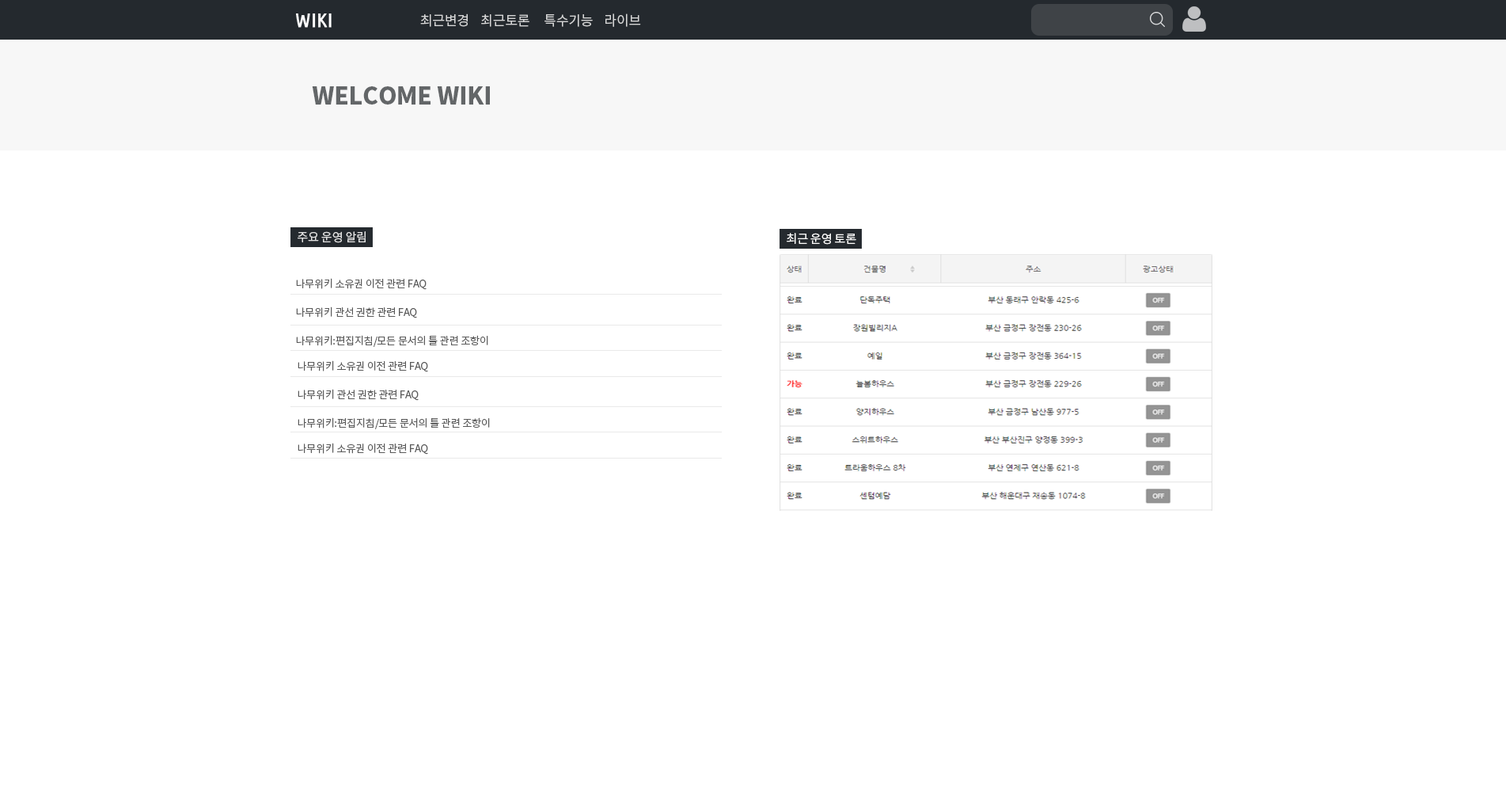
<style>
.page{position:relative;width:1506px;height:792px;background:#ffffff}
.page>*{position:absolute;margin:0}
.t1{font:19.8px "UbuntuCondensed-Regular";color:#ffffff;text-transform:uppercase;font-weight:bold}
.t2{font:13.5px "NotoSansCJKkr-DemiLight";letter-spacing:-0.01em;color:#d7d7d8;text-transform:uppercase}
.t3{font:23.7px "NotoSansCJKkr-Black";letter-spacing:-0.01em;color:#636668;text-transform:uppercase}
.t4{font:11.9px "NotoSansCJKkr-DemiLight";letter-spacing:-0.01em;color:#e3e3e3;text-transform:uppercase}
.t5{font:11.9px "NotoSansCJKkr-DemiLight";letter-spacing:-0.01em;color:#ffffff;text-transform:uppercase}
.t6{font:10.3px/28.5px "NotoSansCJKkr-DemiLight";letter-spacing:-0.01em;color:#5a5a5a;text-transform:uppercase}
.t7{font:10.3px "NotoSansCJKkr-DemiLight";letter-spacing:-0.01em;color:#5a5a5a;text-transform:uppercase}
</style>
<div class="page">
<p class="t1" style="left:296px;top:13px;width:36px;height:15px">wiki</p>
<p class="t2" style="left:420px;top:13px;width:221px;height:14px">최근변경    최근토론     특수기능    라이브</p>
<p class="t3" style="left:312px;top:86px;width:178px;height:18px">welcome wiki</p>
<p class="t4" style="left:298px;top:231px;width:68px;height:12px">주요 운영 알림</p>
<p class="t5" style="left:787px;top:233px;width:69px;height:12px">최근 운영 토론</p>
<p class="t6" style="left:296px;top:278px;width:192px;height:69px">나무위키 소유권 이전 관련 FAQ<br>나무위키 관선 권한 관련 FAQ<br>나무위키:편집지침/모든 문서의 틀 관련 조항이</p>
<p class="t6" style="left:298px;top:360px;width:192px;height:69px">나무위키 소유권 이전 관련 FAQ<br>나무위키 관선 권한 관련 FAQ<br>나무위키:편집지침/모든 문서의 틀 관련 조항이</p>
<p class="t7" style="left:298px;top:442px;width:130px;height:12px">나무위키 소유권 이전 관련 FAQ</p>
</div>
